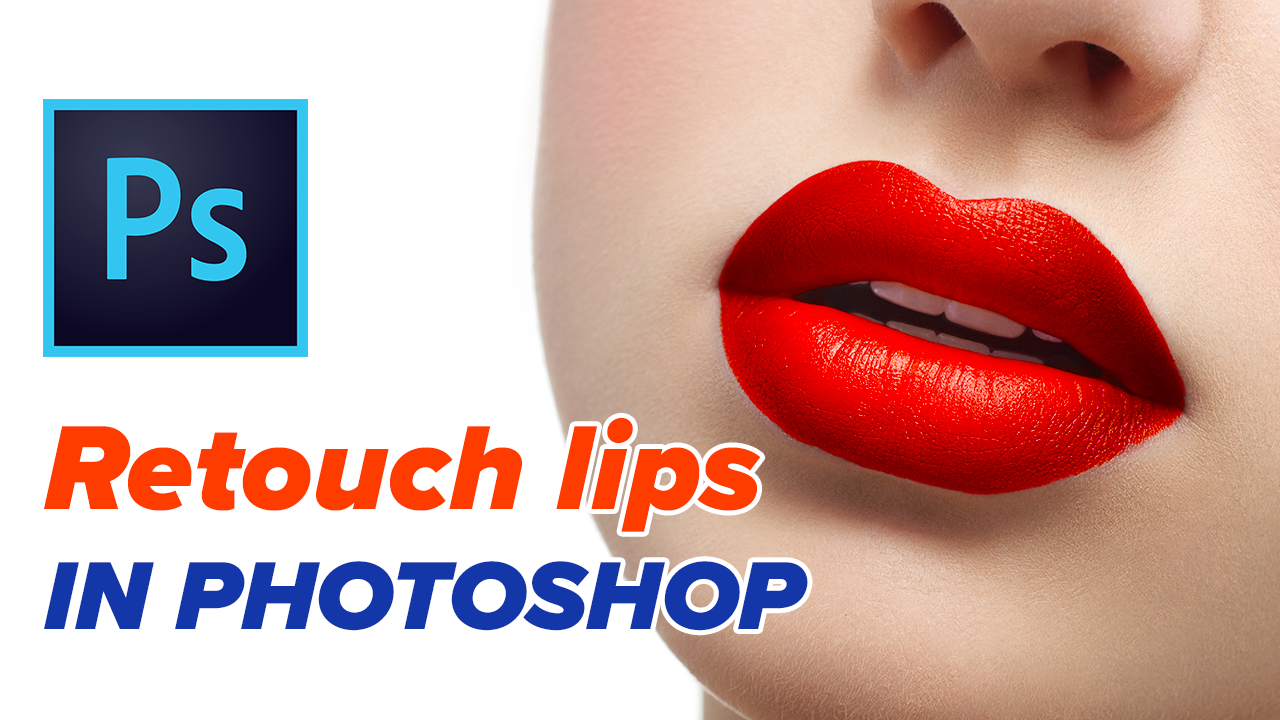
<style>
.page{position:relative;width:1280px;height:720px;background:#ffffff}
.page>*{position:absolute;margin:0}
.t1{font:124px "ProximaNova-BlackIt";color:#ff3c00}
.t2{font:100px "ProximaNova-BlackIt";color:#1336a8;text-transform:uppercase}
</style>
<div class="page">
<p class="t1" style="left:44px;top:417px;width:764px;height:214px">Retouch lips<br><span class="t2">in Photoshop</span></p>
</div>
